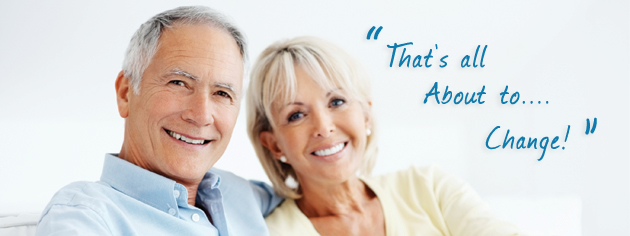
<style>
.page{position:relative;width:630px;height:236px}
.page>*{position:absolute;margin:0}
.t1{font:72px "Journal";letter-spacing:0.05em;color:#0f7bad;font-weight:bold}
.t2{font:36px "Journal";letter-spacing:0.05em;color:#0f7bad;font-weight:bold}
</style>
<div class="page">
<p class="t1" style="left:366px;top:26px;width:17px;height:14px">“</p>
<p class="t2" style="left:386px;top:42px;width:102px;height:26px">That’s all</p>
<p class="t2" style="left:423px;top:82px;width:126px;height:23px">About to....</p>
<p class="t2" style="left:485px;top:125px;width:86px;height:36px">Change!</p>
<p class="t1" style="left:585px;top:117px;width:12px;height:18px">”</p>
</div>
